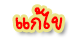
<style>
.page{position:relative;width:78px;height:42px;background:#ffffff}
.page>*{position:absolute;margin:0}
.t1{font:35.2px "2005_iannnnnMTV";color:#ff0000}
</style>
<div class="page">
<p class="t1" style="left:15px;top:7px;width:48px;height:23px">แก้ไข</p>
</div>
